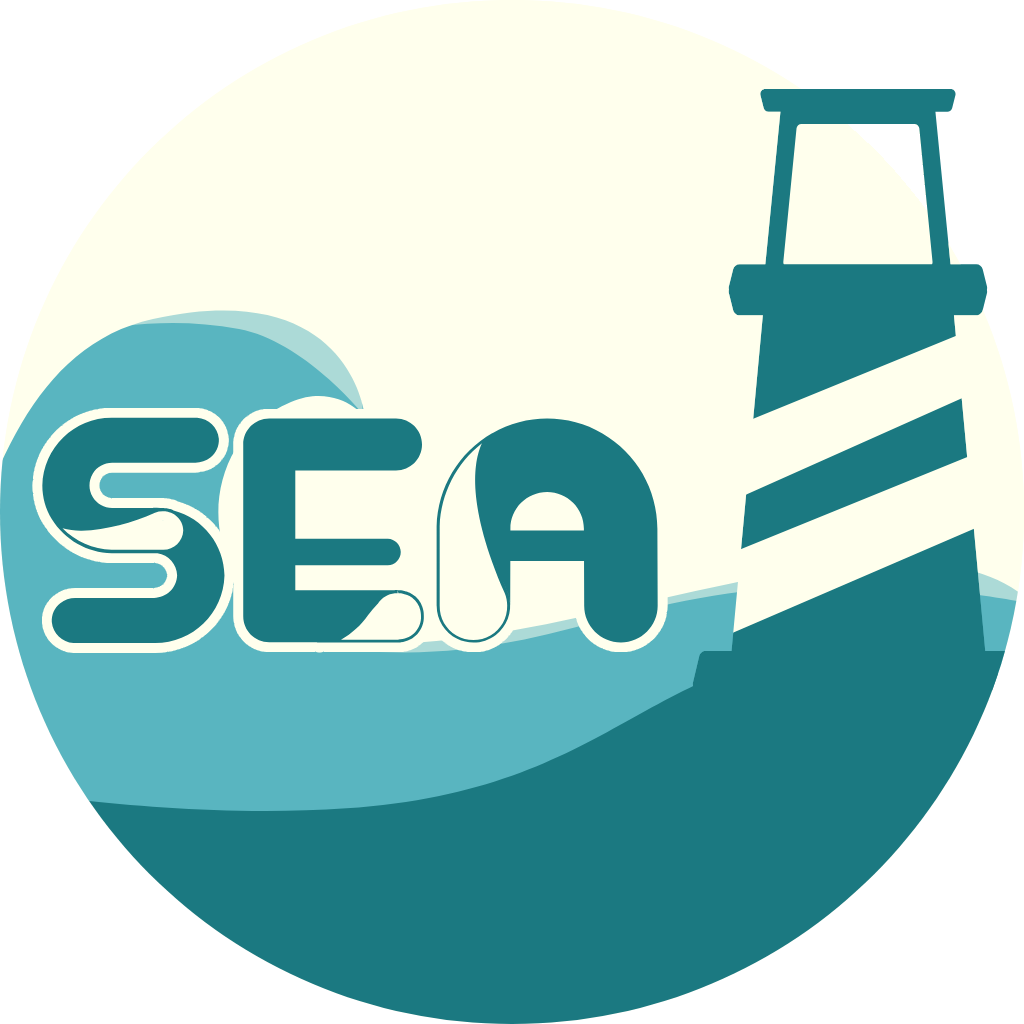
<style>
.page{position:relative;width:1024px;height:1024px;background:#ffffed}
.page>*{position:absolute;margin:0}
.t1{font:307.8px "AquaphonicDamp";color:#1b7981}
.t2{font:333.7px "AquaphonicDamp";color:#1b7981}
</style>
<div class="page">
<p class="t1" style="left:42px;top:413px;width:616px;height:232px"><span class="t2">S</span>EA</p>
</div>
